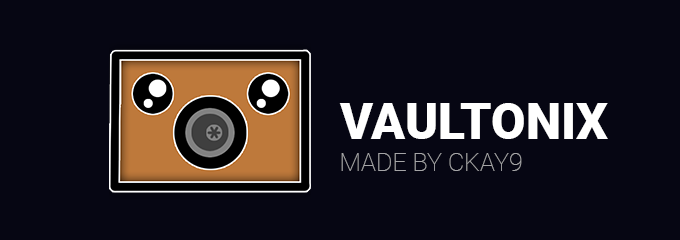
<style>
.page{position:relative;width:680px;height:240px;background:#060613}
.page>*{position:absolute;margin:0}
.t1{font:50px "Roboto-Black";color:#ffffff}
.t2{font:25px "Roboto-Thin";color:#a5a5a7}
</style>
<div class="page">
<p class="t1" style="left:339px;top:103px;width:269px;height:36px">VAULTONIX</p>
<p class="t2" style="left:341px;top:153px;width:181px;height:18px">MADE BY CKAY9</p>
</div>
